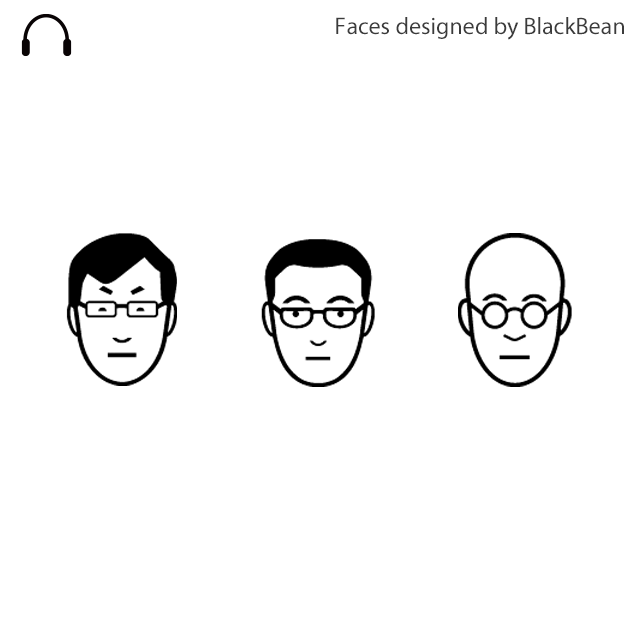
<style>
.page{position:relative;width:640px;height:640px;background:#ffffff}
.page>*{position:absolute;margin:0}
.t1{font:24px "MyriadPro-Regular";color:#3b3b3b}
</style>
<div class="page">
<p class="t1" style="left:336px;top:17px;width:288px;height:23px">Faces designed by BlackBean</p>
</div>
